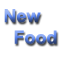
<style>
.page{position:relative;width:60px;height:60px;background:#ffffff}
.page>*{position:absolute;margin:0}
.t1{font:18px "Arial-BoldMT"}
</style>
<div class="page">
<p class="t1" style="left:4px;top:9px;width:53px;height:35px">New<br>  Food</p>
</div>
